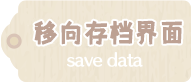
<style>
.page{position:relative;width:191px;height:82px}
.page>*{position:absolute;margin:0}
.t1{font:26.1px "shetumodengxiaofangti";color:#bda193;font-weight:bold;scale:0.94 1}
</style>
<div class="page">
<p class="t1" style="left:34px;top:20px;width:148px;height:25px">移向存档界面</p>
</div>
